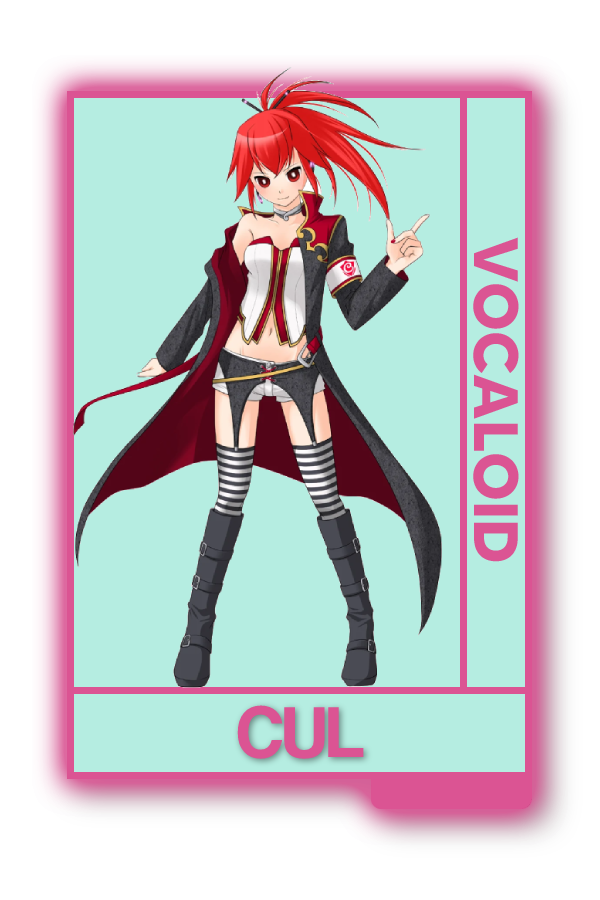
<style>
.page{position:relative;width:600px;height:900px;background:#b5ede1}
.page>*{position:absolute;margin:0}
.t1{font:62.5px "MADETOMMY-Bold";color:#db5493}
.t2{font:75px "CoolveticaRg-Regular";color:#db5493}
</style>
<div class="page">
<p class="t1" style="left:473px;top:237px;width:46px;height:325px;rotate:90deg">VOCALOID</p>
<p class="t2" style="left:237px;top:705px;width:127px;height:54px">CUL</p>
</div>
